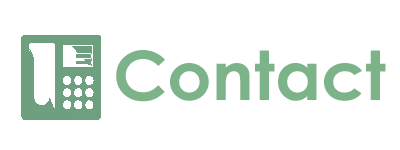
<style>
.page{position:relative;width:400px;height:150px;background:#ffffff}
.page>*{position:absolute;margin:0}
.t1{font:67.9px "CenturyGothic-Bold";color:#7cb389}
</style>
<div class="page">
<p class="t1" style="left:116px;top:50px;width:270px;height:52px">Contact</p>
</div>
